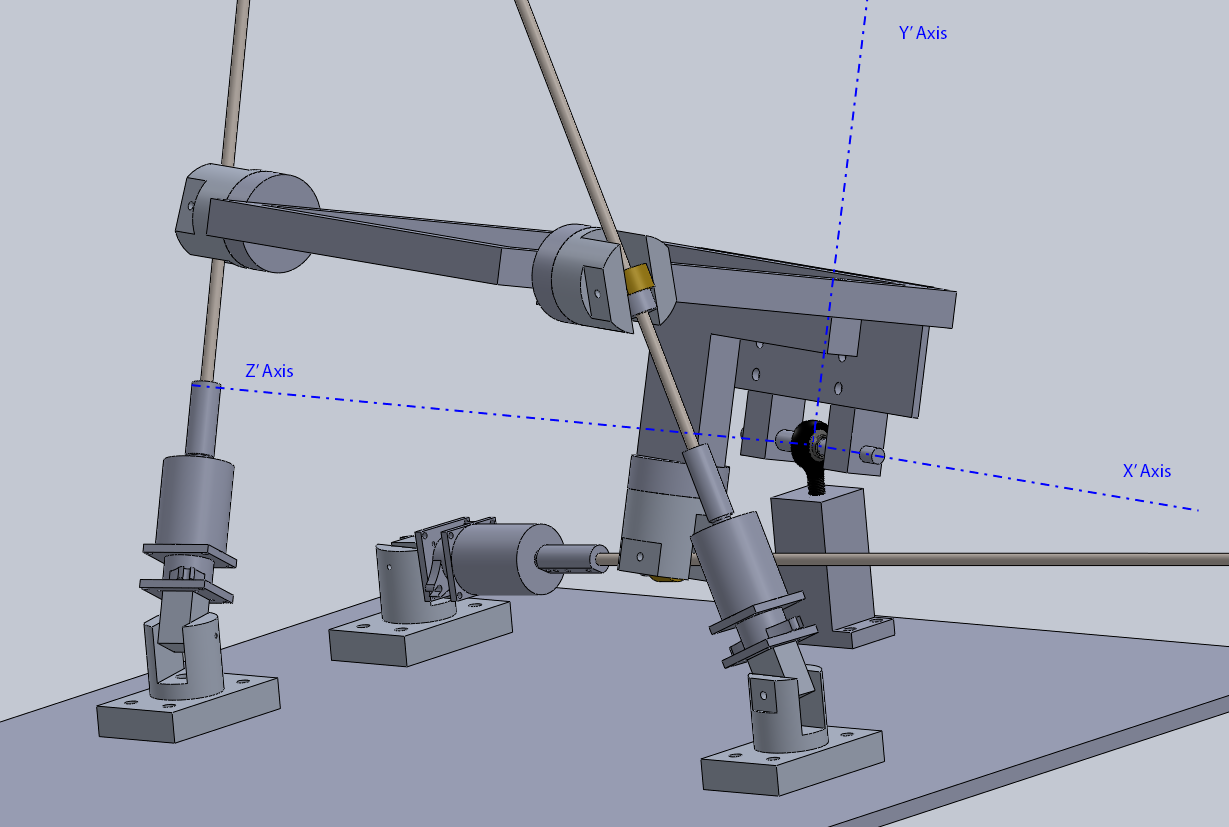
<style>
.page{position:relative;width:1229px;height:827px;background:#c3c8d2}
.page>*{position:absolute;margin:0}
.t1{font:18.7px "MyriadPro-Regular";color:#0000ff}
</style>
<div class="page">
<p class="t1" style="left:899px;top:26px;width:48px;height:13px">Y’ Axis</p>
<p class="t1" style="left:245px;top:364px;width:48px;height:13px">Z’ Axis</p>
<p class="t1" style="left:1123px;top:464px;width:48px;height:13px">X’ Axis</p>
</div>
